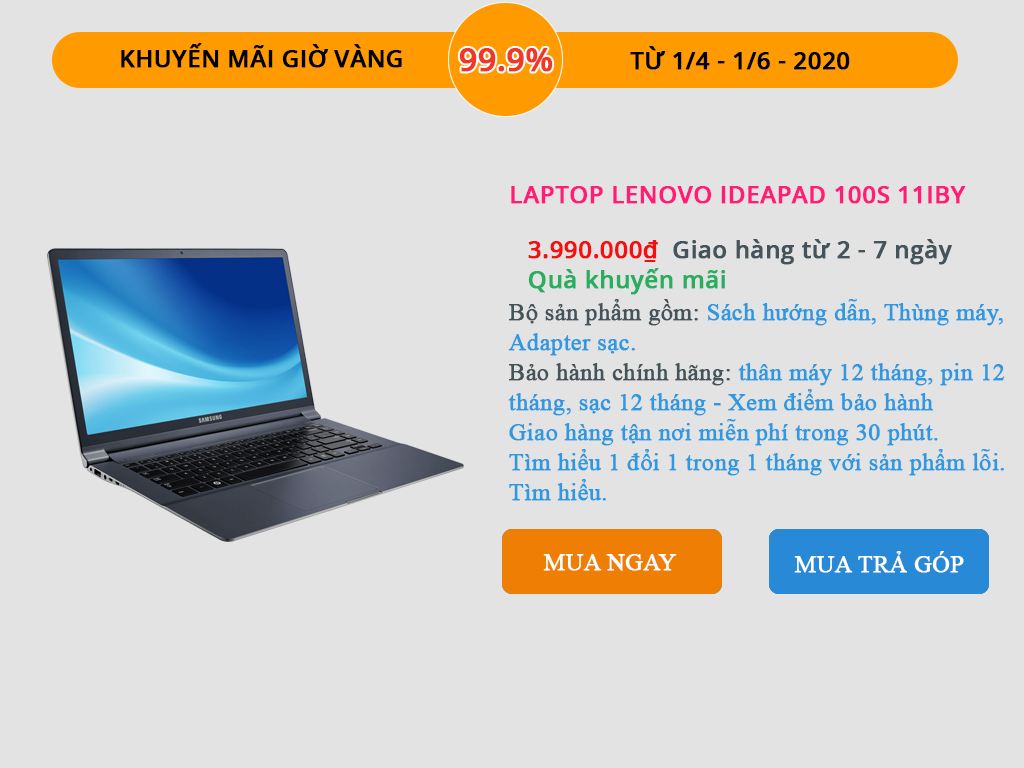
<style>
.page{position:relative;width:1024px;height:768px;background:#e4e3e4}
.page>*{position:absolute;margin:0}
.t1{font:24px "OpenSans-Semibold";color:#000000;font-weight:bold}
.t2{font:31.9px "OpenSans-Semibold";color:#f13728;font-weight:bold}
.t3{font:24px "OpenSans-Semibold";color:#ff1d78;font-weight:bold}
.t4{font:24px/58px "OpenSans-Semibold";color:#45545a;font-weight:bold}
.t5{font:24px/58px "OpenSans-Semibold";color:#f50f0f;font-weight:bold}
.t6{font:24px/30px "OpenSans-Semibold";color:#27ae60;font-weight:bold}
.t7{font:24px/30px "TimesNewRomanPSMT";color:#2e98e0;font-weight:bold}
.t8{font:24px/30px "TimesNewRomanPSMT";color:#45545a;font-weight:bold}
.t9{font:24px "TimesNewRomanPSMT";color:#ffffff;font-weight:bold}
</style>
<div class="page">
<p class="t1" style="left:121px;top:43px;width:281px;height:25px">KHUYẾN MÃI GIỜ VÀNG</p>
<p class="t2" style="left:459px;top:48px;width:94px;height:24px">99.9%</p>
<p class="t1" style="left:630px;top:46px;width:220px;height:24px">TỪ 1/4 - 1/6 - 2020</p>
<p class="t3" style="left:511px;top:186px;width:455px;height:18px">LAPTOP LENOVO IDEAPAD 100S 11IBY</p>
<p class="t4" style="left:528px;top:239px;width:424px;height:56px"><span class="t5">3.990.000₫  </span>Giao hàng từ 2 - 7 ngày<br><span class="t6">Quà khuyến mãi</span></p>
<p class="t7" style="left:508px;top:299px;width:497px;height:202px"><span class="t8">Bộ sản phẩm gồm: </span>Sách hướng dẫn, Thùng máy, <br>Adapter sạc.<br><span class="t8">Bảo hành chính hãng: </span>thân máy 12 tháng, pin 12<br>tháng, sạc 12 tháng - Xem điểm bảo hành<br>Giao hàng tận nơi miễn phí trong 30 phút. <br>Tìm hiểu 1 đổi 1 trong 1 tháng với sản phẩm lỗi. <br>Tìm hiểu.</p>
<p class="t9" style="left:543px;top:554px;width:134px;height:17px">MUA NGAY</p>
<p class="t9" style="left:794px;top:551px;width:170px;height:22px">MUA TRẢ GÓP</p>
</div>
